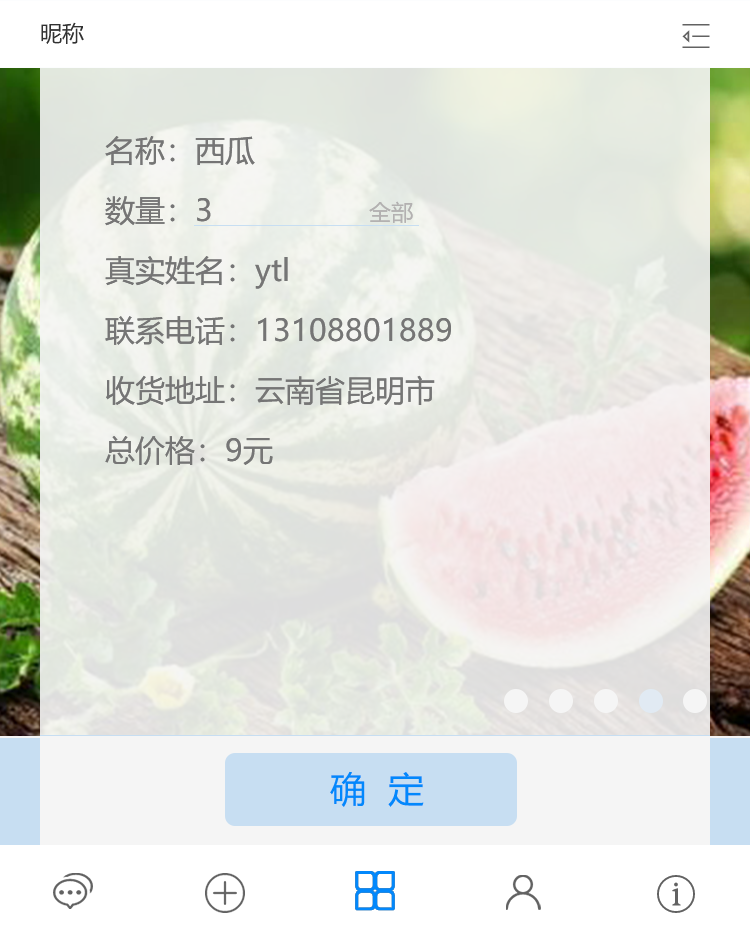
<style>
.page{position:relative;width:750px;height:943px}
.page>*{position:absolute;margin:0}
.t1{font:22px "MicrosoftYaHei";color:#323232;text-transform:uppercase}
.t2{font:30px/60px "MicrosoftYaHei";color:#757575}
.t3{font:22px "MicrosoftYaHei";color:#b3b1b1}
.t4{font:36px "MicrosoftYaHei";color:#0288fc;text-transform:uppercase}
</style>
<div class="page">
<p class="t1" style="left:41px;top:22px;width:43px;height:22px">昵称</p>
<p class="t2" style="left:105px;top:136px;width:346px;height:329px">名称：西瓜<br>数量：3<br>真实姓名：ytl<br>联系电话：13108801889<br>收货地址：云南省昆明市<br>总价格：9元</p>
<p class="t3" style="left:369px;top:201px;width:44px;height:22px">全部</p>
<p class="t4" style="left:330px;top:771px;width:94px;height:36px">确  定</p>
</div>
